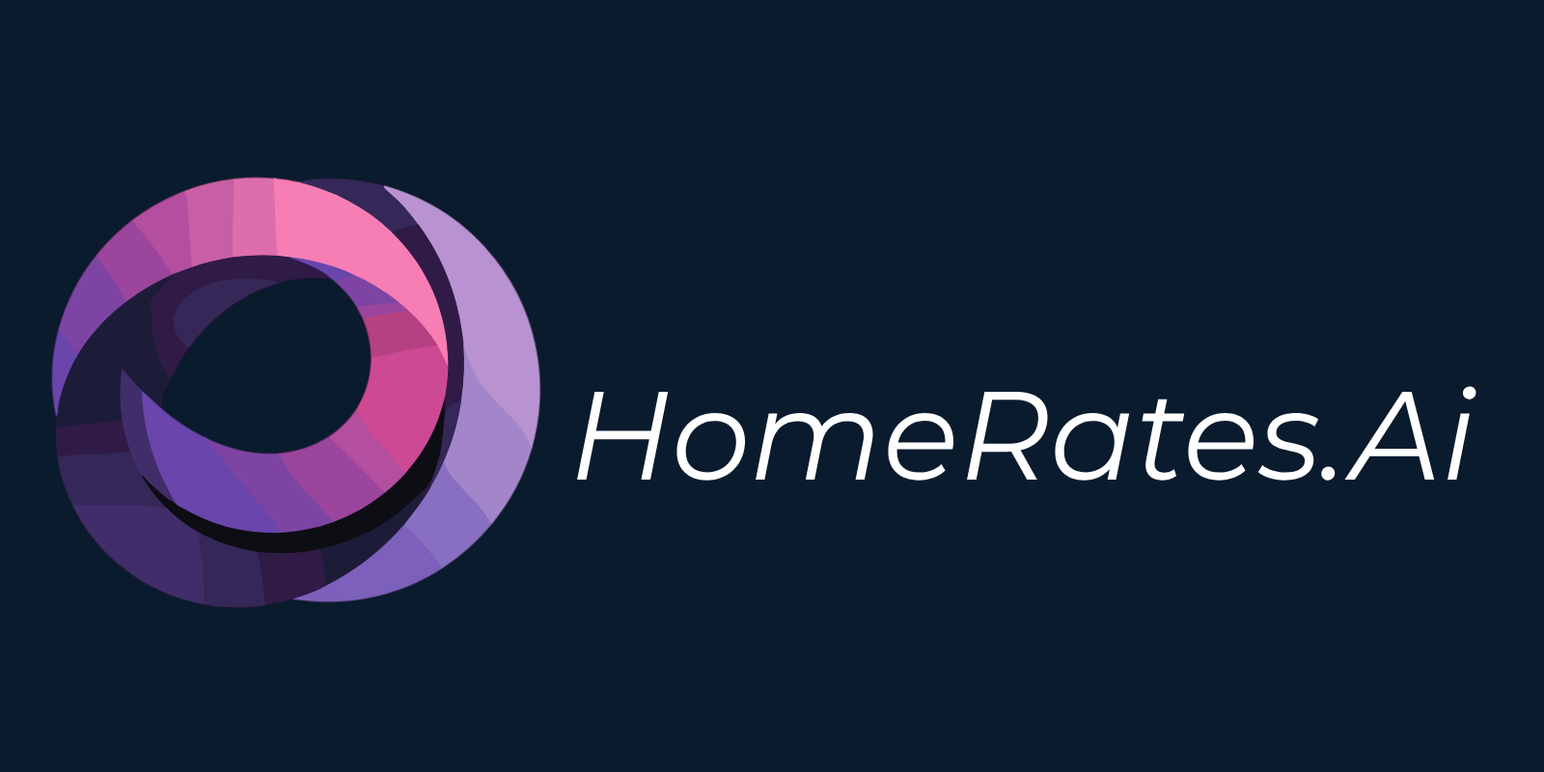
<style>
.page{position:relative;width:1544px;height:772px;background:#0a1b2e}
.page>*{position:absolute;margin:0}
.t1{font:125.5px "Montserrat-Italic";color:#ffffff}
</style>
<div class="page">
<p class="t1" style="left:577px;top:386px;width:900px;height:95px">HomeRates.Ai</p>
</div>
